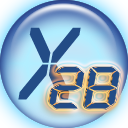
<style>
.page{position:relative;width:128px;height:128px}
.page>*{position:absolute;margin:0}
.t1{font:99.6px "QuiverItal";color:#234c86;scale:1.25 1}
.t2{font:56.8px "QuiverItal";color:#234c86;scale:1.25 1}
</style>
<div class="page">
<p class="t1" style="left:18px;top:27px;width:63px;height:73px">X</p>
<p class="t2" style="left:48px;top:66px;width:71px;height:42px">2B</p>
<p class="t2" style="left:49px;top:67px;width:71px;height:42px">2B</p>
</div>
